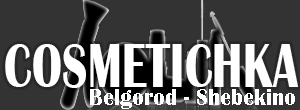
<style>
.page{position:relative;width:300px;height:110px;background:#333333}
.page>*{position:absolute;margin:0}
.t1{font:64px "BritannicBold";color:#ffffff;scale:0.72 1}
.t2{font:24.2px "BritannicBold";color:#ffffff;scale:0.91 1}
</style>
<div class="page">
<p class="t1" style="left:5px;top:44px;width:293px;height:44px">COSMETICHKA</p>
<p class="t2" style="left:90px;top:89px;width:205px;height:20px">Belgorod - Shebekino</p>
</div>
